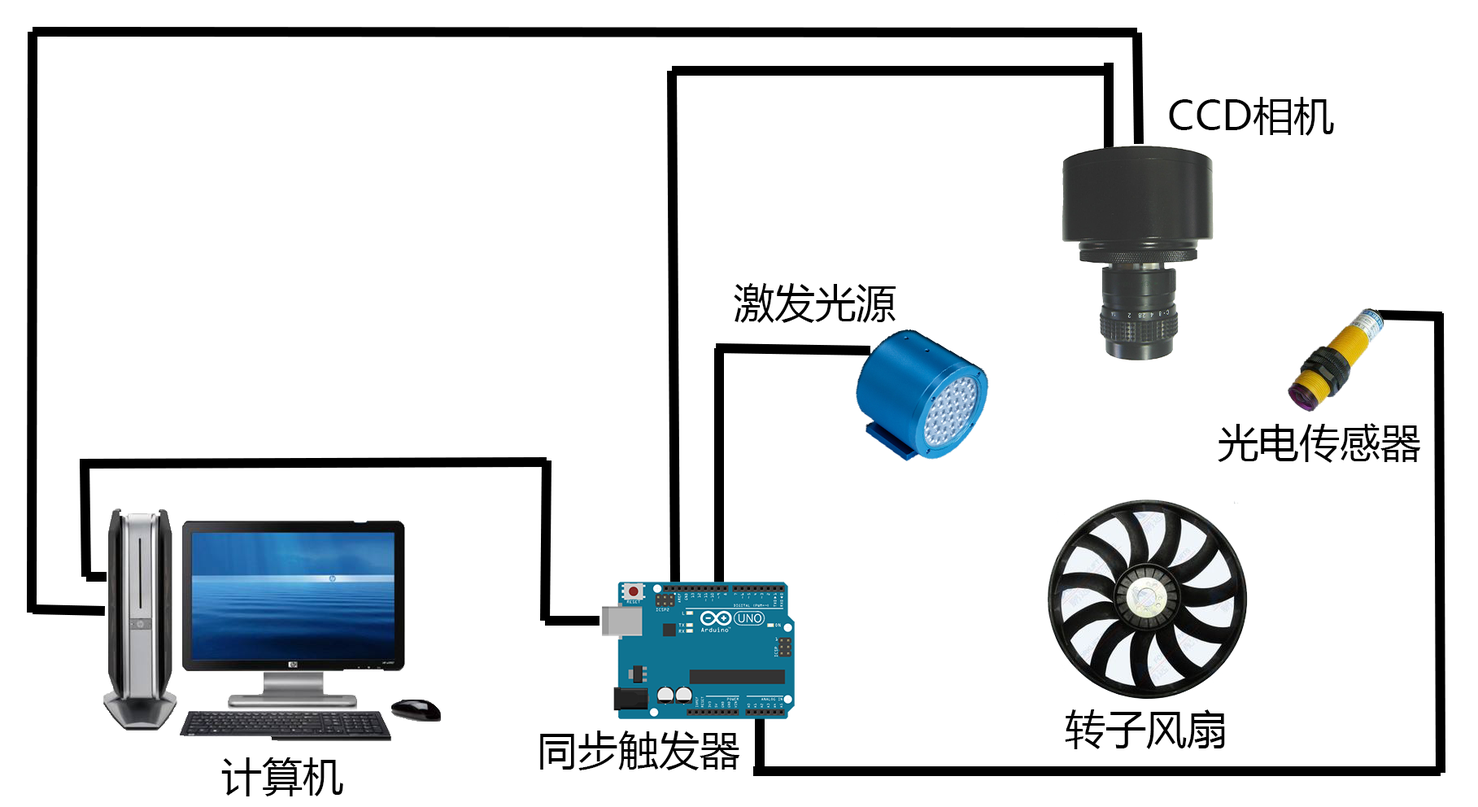
<style>
.page{position:relative;width:1478px;height:807px;background:#ffffff}
.page>*{position:absolute;margin:0}
.t1{font:40.7px "MicrosoftYaHei";color:#000000}
</style>
<div class="page">
<p class="t1" style="left:1169px;top:97px;width:165px;height:39px">CCD相机</p>
<p class="t1" style="left:734px;top:283px;width:162px;height:40px">激发光源</p>
<p class="t1" style="left:1218px;top:423px;width:203px;height:40px">光电传感器</p>
<p class="t1" style="left:1065px;top:709px;width:160px;height:40px">转子风扇</p>
<p class="t1" style="left:540px;top:730px;width:200px;height:40px">同步触发器</p>
<p class="t1" style="left:221px;top:757px;width:122px;height:39px">计算机</p>
</div>
